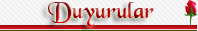
<style>
.page{position:relative;width:198px;height:31px;background:#f1f1f1}
.page>*{position:absolute;margin:0}
.t1{font:24px "Black-Regular"}
</style>
<div class="page">
<p class="t1" style="left:48px;top:2px;width:106px;height:24px">Duyurular</p>
</div>
